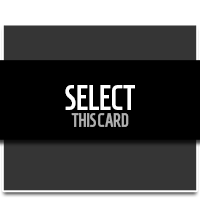
<style>
.page{position:relative;width:200px;height:218px;background:#353535}
.page>*{position:absolute;margin:0}
.t1{font:33.2px "HomenajeMod-Bold";color:#ffffff;scale:0.87 1}
.t2{font:19px "HomenajeMod-Bold";color:#afafaf;scale:0.87 1}
</style>
<div class="page">
<p class="t1" style="left:65px;top:85px;width:70px;height:25px">SELECT</p>
<p class="t2" style="left:71px;top:113px;width:58px;height:14px">THIS CARD</p>
</div>
